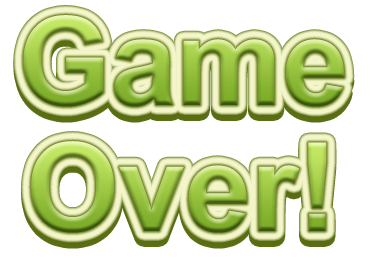
<style>
.page{position:relative;width:380px;height:260px;background:#ffffff}
.page>*{position:absolute;margin:0}
.t1{font:123.2px "Arial-BoldMT";scale:0.97 1}
</style>
<div class="page">
<p class="t1" style="left:23px;top:15px;width:322px;height:92px">Game</p>
<p class="t1" style="left:23px;top:21px;width:322px;height:92px">Game</p>
<p class="t1" style="left:31px;top:147px;width:296px;height:92px">Over!</p>
<p class="t1" style="left:31px;top:141px;width:296px;height:92px">Over!</p>
</div>
